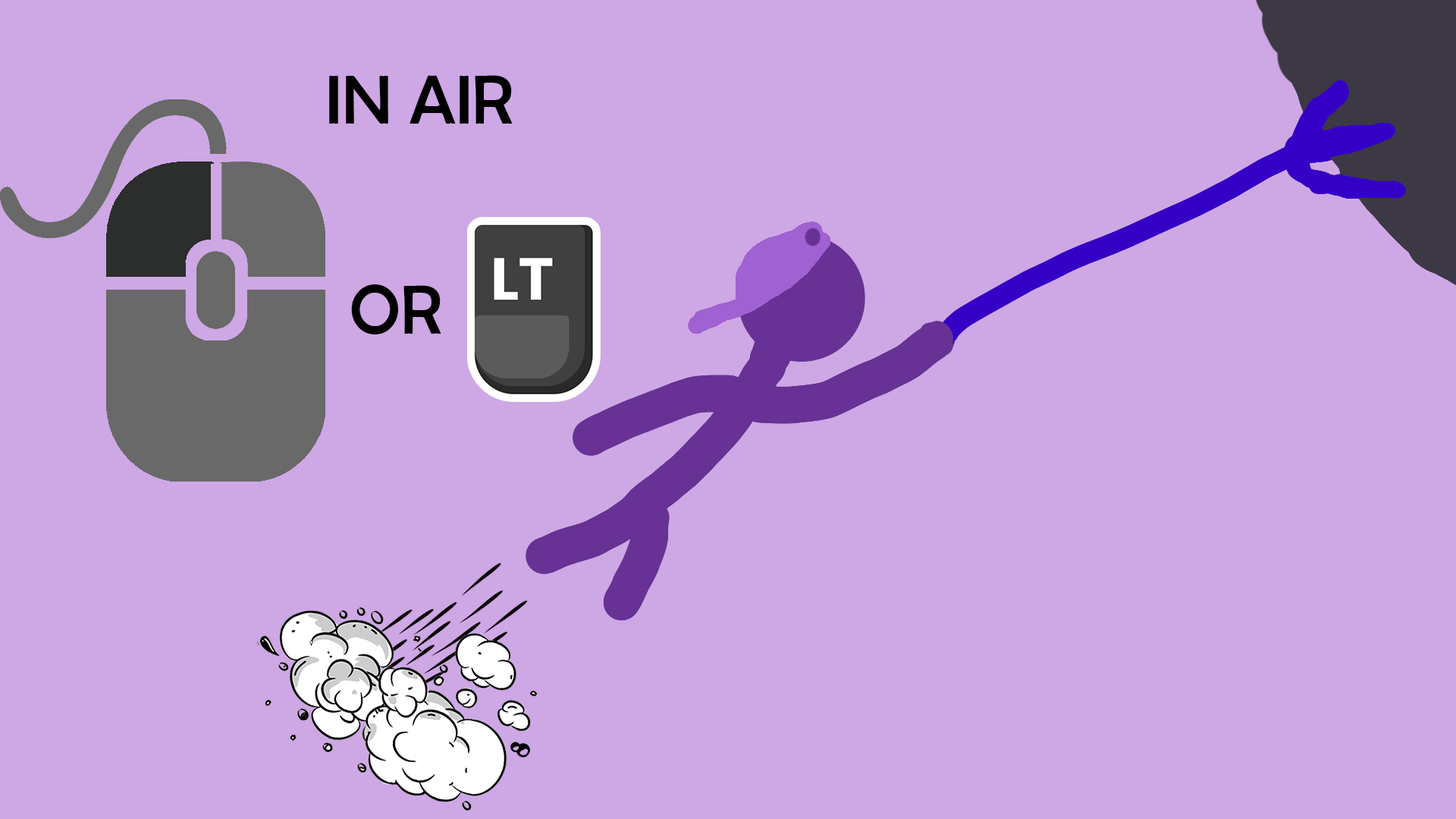
<style>
.page{position:relative;width:1456px;height:819px;background:#cea7e5}
.page>*{position:absolute;margin:0}
.t1{font:69.8px "BerlinSansFB-Reg";color:#000000}
</style>
<div class="page">
<p class="t1" style="left:329px;top:75px;width:184px;height:49px">IN AIR</p>
<p class="t1" style="left:351px;top:284px;width:90px;height:50px">OR</p>
</div>
